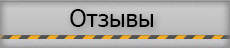
<style>
.page{position:relative;width:230px;height:48px}
.page>*{position:absolute;margin:0}
.t1{font:24px "Tahoma";color:#000000}
</style>
<div class="page">
<p class="t1" style="left:70px;top:9px;width:83px;height:18px">Отзывы</p>
</div>
